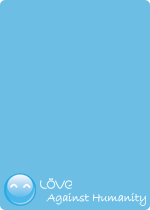
<style>
.page{position:relative;width:150px;height:210px;background:#6cbee4}
.page>*{position:absolute;margin:0}
.t1{font:12px "BradleyHandITC";color:#ffffff}
</style>
<div class="page">
<p class="t1" style="left:46px;top:192px;width:100px;height:14px">Against Humanity</p>
</div>
